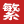
<style>
.page{position:relative;width:24px;height:24px;background:#c32222}
.page>*{position:absolute;margin:0}
.t1{font:18.2px "HYy1gf";color:#ffffff}
</style>
<div class="page">
<p class="t1" style="left:2px;top:3px;width:18px;height:18px">繁</p>
</div>
